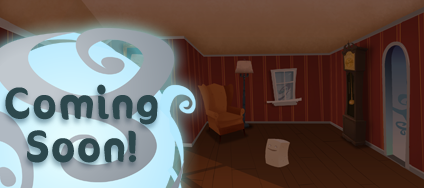
<style>
.page{position:relative;width:424px;height:188px}
.page>*{position:absolute;margin:0}
.t1{font:36px "SunnySide";letter-spacing:0.07em;color:#2c474c;font-weight:bold}
</style>
<div class="page">
<p class="t1" style="left:5px;top:84px;width:153px;height:79px;text-align:center">Coming<br>Soon!</p>
</div>
